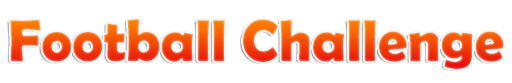
<style>
.page{position:relative;width:512px;height:83px;background:#ffffff}
.page>*{position:absolute;margin:0}
.t1{font:59.2px "BerlinSansFBDemi-Bold"}
</style>
<div class="page">
<p class="t1" style="left:10px;top:19px;width:494px;height:50px">Football Challenge</p>
</div>
